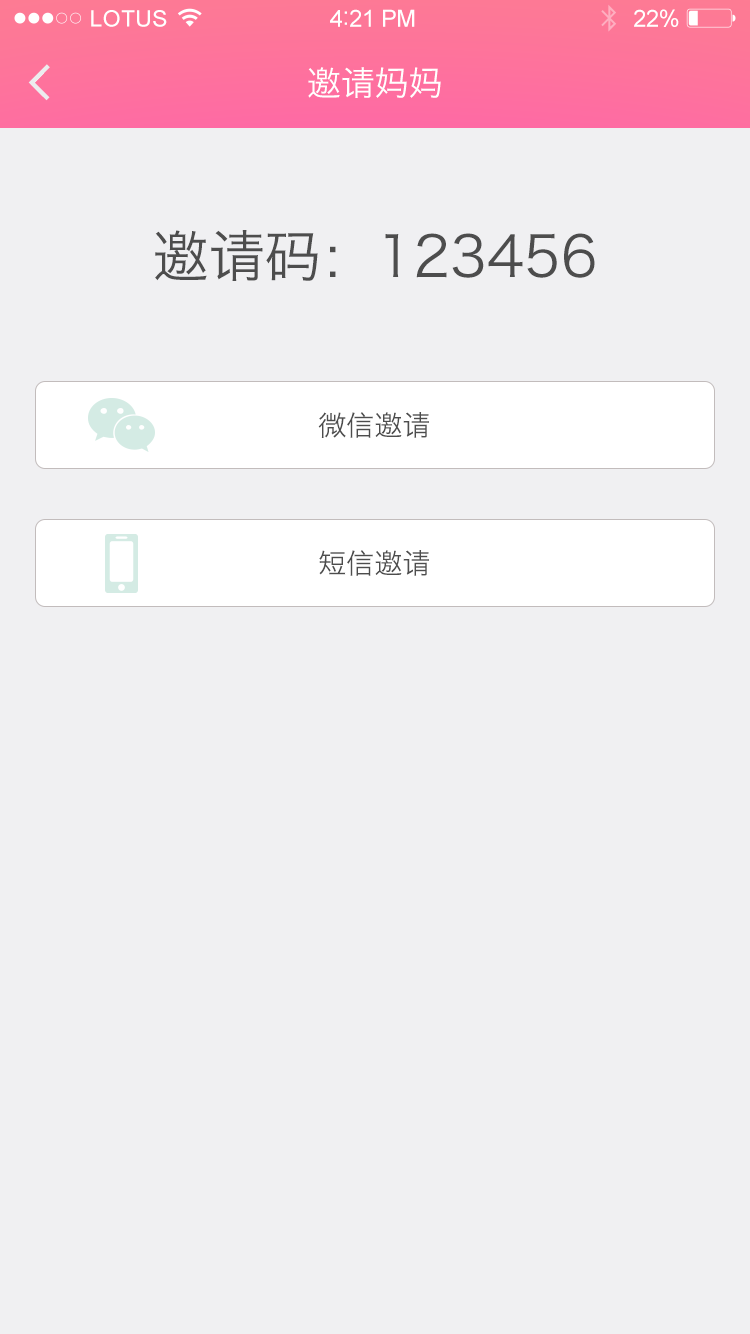
<style>
.page{position:relative;width:750px;height:1334px;background:#f0f0f2}
.page>*{position:absolute;margin:0}
.t1{font:22.6px "ArialMT";letter-spacing:0.02em;color:#ffffff}
.t2{font:23.6px "ArialMT";letter-spacing:-0.02em;color:#ffffff}
.t3{font:25.6px "ArialMT";letter-spacing:-0.02em;color:#ffffff}
.t4{font:34px "HiraginoSansGB-W3";color:#ffffff}
.t5{font:56px "HiraginoSansGB-W3";color:#4d4d4d}
.t6{font:28px "HiraginoSansGB-W3";color:#4d4d4d}
</style>
<div class="page">
<p class="t1" style="left:91px;top:10px;width:76px;height:17px">LOTUS</p>
<p class="t2" style="left:330px;top:9px;width:85px;height:18px">4<span class="t3">:</span>21 PM</p>
<p class="t2" style="left:634px;top:9px;width:45px;height:18px">22%</p>
<p class="t4" style="left:308px;top:67px;width:133px;height:31px">邀请妈妈</p>
<p class="t5" style="left:155px;top:230px;width:440px;height:51px">邀请码：123456</p>
<p class="t6" style="left:318px;top:412px;width:111px;height:26px">微信邀请</p>
<p class="t6" style="left:319px;top:550px;width:110px;height:26px">短信邀请</p>
</div>
